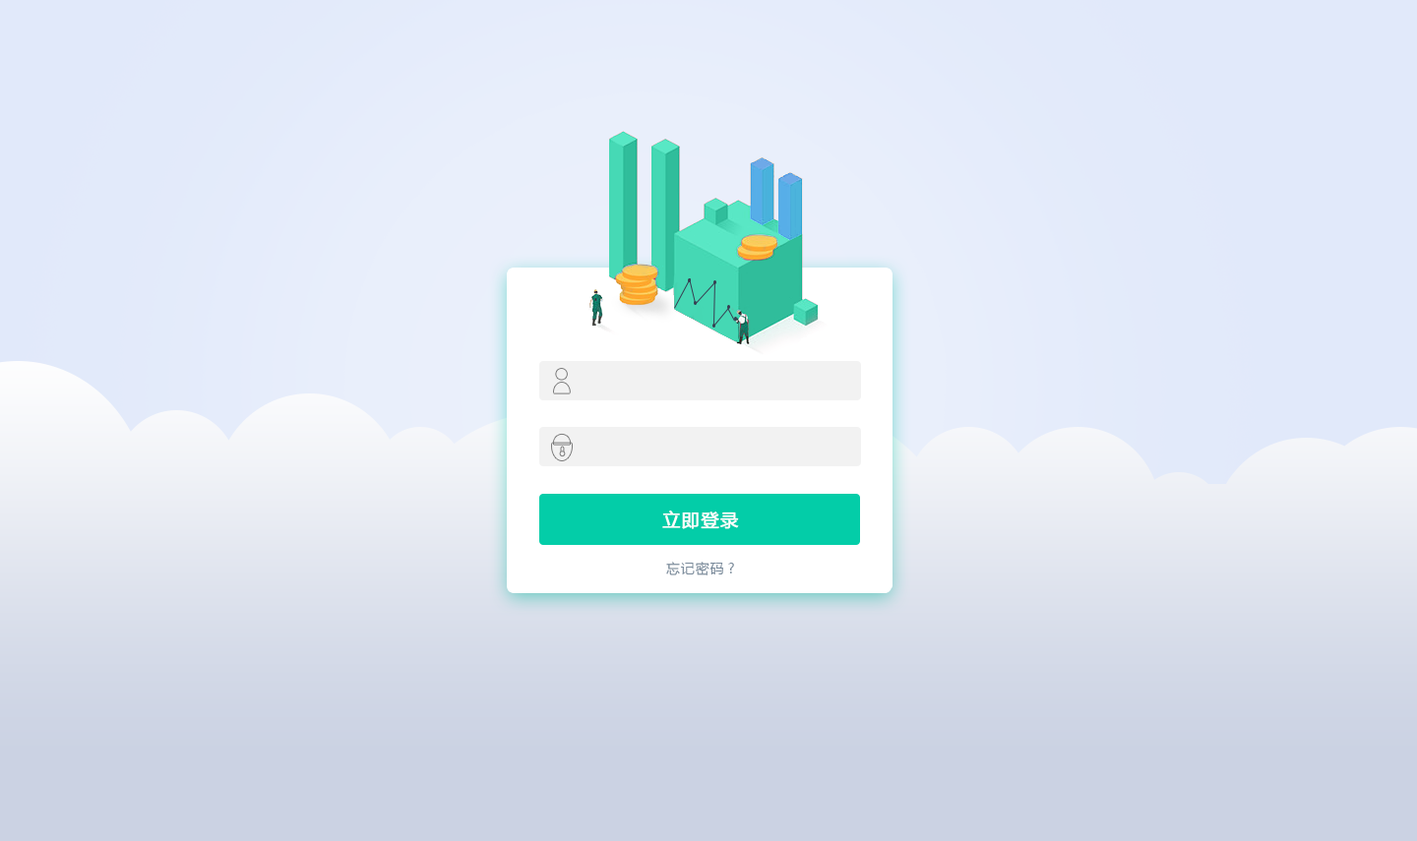
<style>
.page{position:relative;width:1417px;height:841px}
.page>*{position:absolute;margin:0}
.t1{font:17.7px "MicrosoftYaHei";letter-spacing:0.06em;color:#ffffff;font-weight:bold}
.t2{font:13.8px "MicrosoftYaHei";letter-spacing:0.06em;color:#78899a}
</style>
<div class="page">
<p class="t1" style="left:662px;top:511px;width:77px;height:18px">立即登录</p>
<p class="t2" style="left:666px;top:562px;width:68px;height:14px">忘记密码?</p>
</div>
